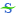
<style>
.page{position:relative;width:16px;height:16px;background:#ffffff}
.page>*{position:absolute;margin:0}
.t1{font:15px "IskoolaPota";color:#3366cc}
</style>
<div class="page">
<p class="t1" style="left:4px;top:3px;width:8px;height:10px">S</p>
</div>
